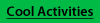
<style>
.page{position:relative;width:100px;height:23px;background:#00ba46}
.page>*{position:absolute;margin:0}
.t1{font:14px "MyriadPro-Semibold";color:#000000;text-decoration:underline}
</style>
<div class="page">
<p class="t1" style="left:6px;top:6px;width:88px;height:13px">Cool Activities</p>
</div>
